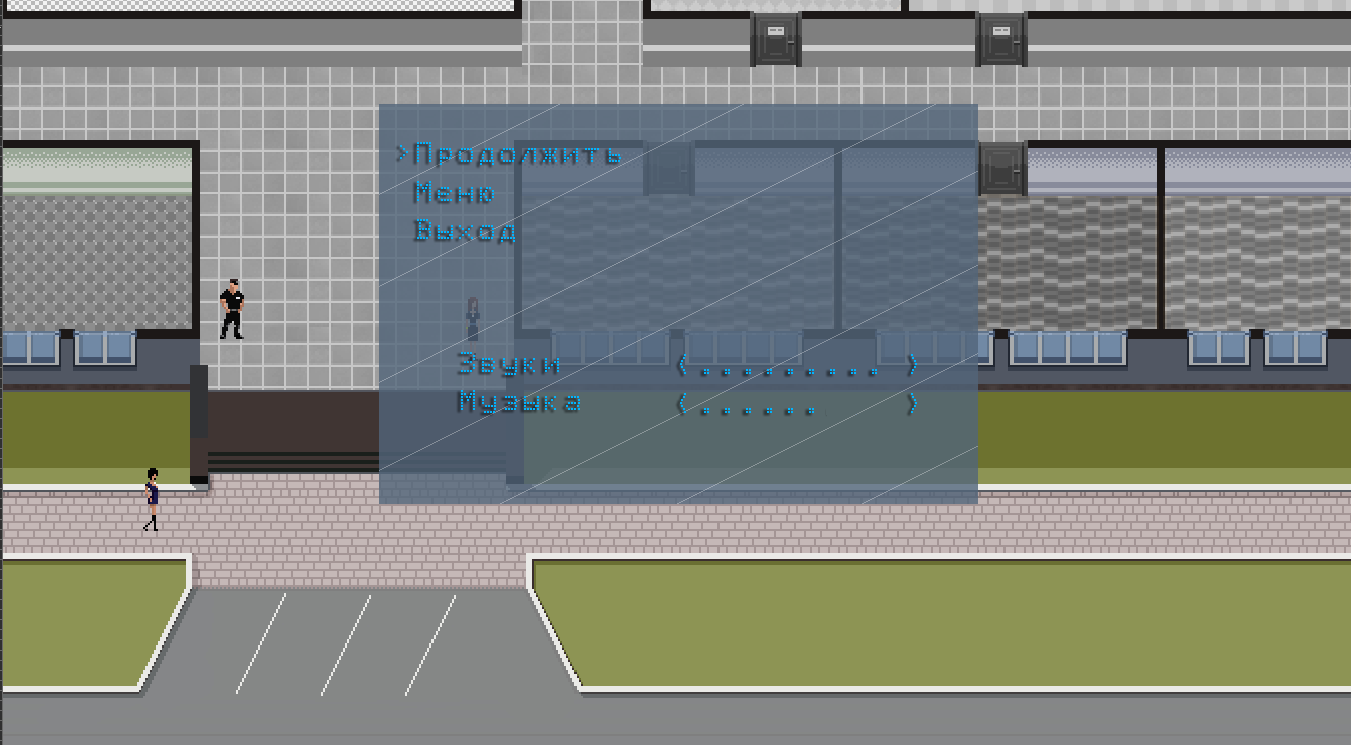
<style>
.page{position:relative;width:1351px;height:745px}
.page>*{position:absolute;margin:0}
.t1{font:32px "Epson1";color:#00b4ff}
</style>
<div class="page">
<p class="t1" style="left:417px;top:142px;width:204px;height:100px;text-align:right">Продолжить<br>Меню<br>Выход</p>
<p class="t1" style="left:461px;top:352px;width:119px;height:61px;text-align:right">Звуки<br>Музыка</p>
</div>
